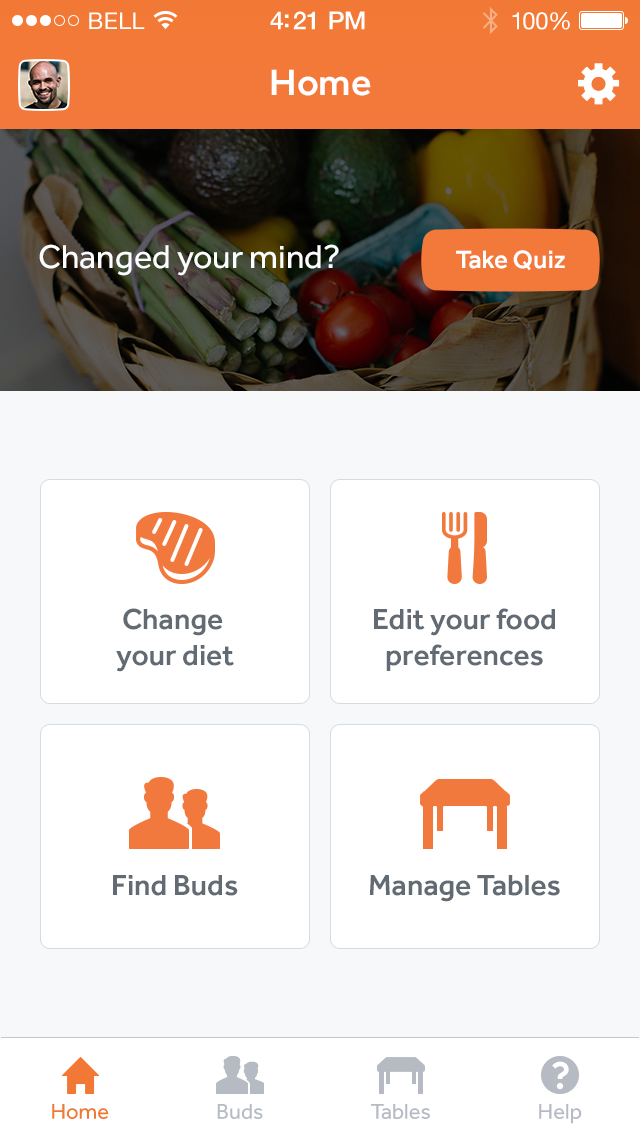
<style>
.page{position:relative;width:640px;height:1136px;background:#ffffff}
.page>*{position:absolute;margin:0}
.t1{font:23px "HelveticaNeue";letter-spacing:0.02em;color:#ffffff}
.t2{font:25px "HelveticaNeue-Medium";letter-spacing:-0.02em;color:#ffffff}
.t3{font:24px "HelveticaNeue";letter-spacing:-0.02em;color:#ffffff}
.t4{font:38px "Effra-Medium";color:#ffffff}
.t5{font:34px "Effra-Regular";color:#fbfdff}
.t6{font:26px "Effra-Medium";color:#ffffff}
.t7{font:30px "Effra-Medium";color:#626a73}
.t8{font:22px "Effra-Regular";color:#f27935}
.t9{font:22px "Effra-Regular";color:#b5bac3}
</style>
<div class="page">
<p class="t1" style="left:89px;top:12px;width:56px;height:17px">BELL</p>
<p class="t2" style="left:270px;top:11px;width:95px;height:19px">4:21 PM</p>
<p class="t3" style="left:512px;top:12px;width:58px;height:18px">100%</p>
<p class="t4" style="left:271px;top:69px;width:100px;height:27px">Home</p>
<p class="t5" style="left:39px;top:244px;width:300px;height:32px">Changed your mind?</p>
<p class="t6" style="left:456px;top:250px;width:109px;height:21px">Take Quiz</p>
<p class="t7" style="left:116px;top:608px;width:118px;height:64px;text-align:center">Change <br>your diet</p>
<p class="t7" style="left:374px;top:608px;width:181px;height:63px;text-align:center">Edit your food<br>preferences</p>
<p class="t7" style="left:113px;top:875px;width:125px;height:21px">Find Buds</p>
<p class="t7" style="left:369px;top:875px;width:191px;height:27px">Manage Tables</p>
<p class="t8" style="left:52px;top:1104px;width:57px;height:15px">Home</p>
<p class="t9" style="left:217px;top:1104px;width:46px;height:15px">Buds</p>
<p class="t9" style="left:371px;top:1104px;width:59px;height:15px">Tables</p>
<p class="t9" style="left:539px;top:1104px;width:43px;height:20px">Help</p>
</div>
